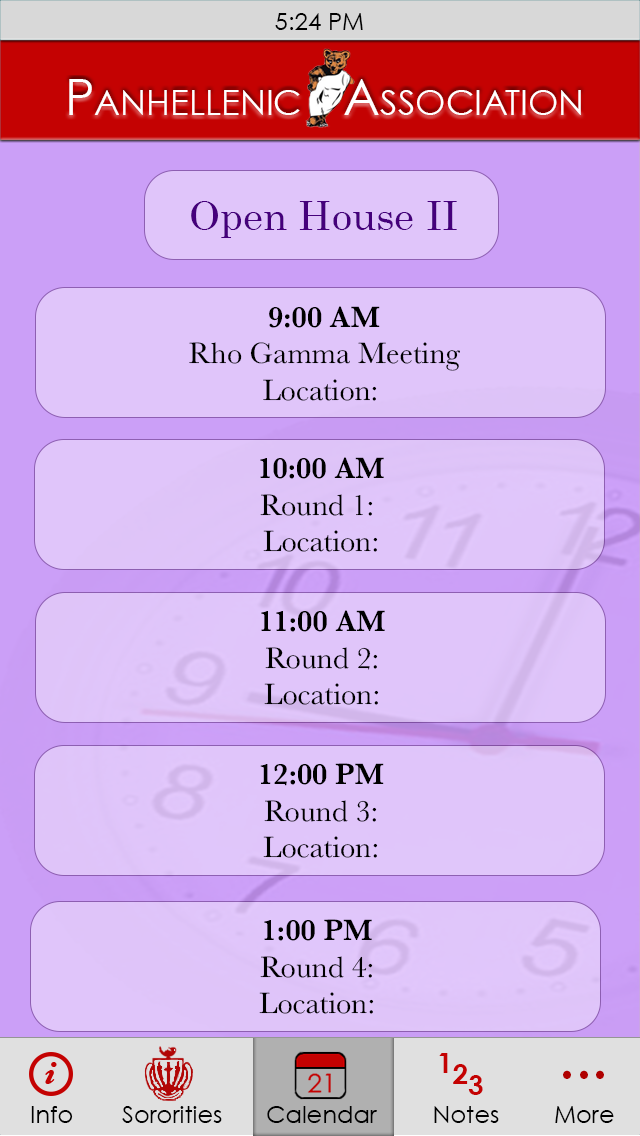
<style>
.page{position:relative;width:640px;height:1136px;background:#e0c5fa}
.page>*{position:absolute;margin:0}
.t1{font:50px "CenturyGothic";color:#ffffff;font-variant:small-caps}
.t2{font:50px "CenturyGothic";color:#ffffff}
.t3{font:40px "Century";color:#45007b}
.t4{font:30.4px "Baskerville";color:#000000}
.t5{font:30.4px "Baskerville-SemiBold";color:#000000}
.t6{font:28px/11px "CenturyGothic-Bold";color:#c40202}
.t7{font:72px "MinionPro-Regular";color:#b00000}
.t8{font:24px "CenturyGothic";color:#000000}
</style>
<div class="page">
<p class="t1" style="left:69px;top:79px;width:512px;height:36px"><span class="t2"> P</span>anhellenic   Association</p>
<p class="t3" style="left:191px;top:201px;width:266px;height:37px">Open House II</p>
<p class="t4" style="left:189px;top:306px;width:271px;height:95px;text-align:center"><span class="t5">9:00 AM<br></span>Rho Gamma Meeting<br>Location:</p>
<p class="t4" style="left:260px;top:457px;width:124px;height:95px;text-align:center"><span class="t5">10:00 AM<br></span>Round 1: <br>Location:</p>
<p class="t4" style="left:261px;top:610px;width:124px;height:95px;text-align:center"><span class="t5">11:00 AM<br></span>Round 2:<br>Location:</p>
<p class="t4" style="left:260px;top:763px;width:124px;height:95px;text-align:center"><span class="t5">12:00 PM<br></span>Round 3:<br>Location:</p>
<p class="t4" style="left:259px;top:919px;width:115px;height:95px;text-align:center"><span class="t5">1:00 PM<br></span>Round 4:<br>Location:</p>
<p class="t6" style="left:439px;top:1053px;width:44px;height:42px">1<br>  2<br>    3</p>
<p class="t7" style="left:563px;top:1070px;width:41px;height:9px">...</p>
<p class="t8" style="left:31px;top:1106px;width:583px;height:17px">Info    Sororities    Calendar   Notes    More</p>
</div>
